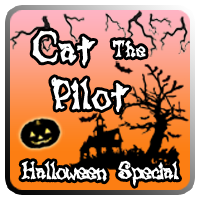
<style>
.page{position:relative;width:200px;height:200px}
.page>*{position:absolute;margin:0}
.t1{font:45.3px "LunacyMore";color:#ffffff;font-weight:bold}
.t2{font:23.4px "LunacyMore";color:#ffffff;font-weight:bold}
.t3{font:26.4px "LunacyMore";letter-spacing:-0.05em;color:#ffffff;font-weight:bold}
</style>
<div class="page">
<p class="t1" style="left:32px;top:30px;width:64px;height:36px">Cat</p>
<p class="t2" style="left:112px;top:40px;width:34px;height:18px">The</p>
<p class="t1" style="left:51px;top:77px;width:78px;height:35px">Pilot</p>
<p class="t3" style="left:21px;top:160px;width:158px;height:26px">Halloween Special</p>
</div>
